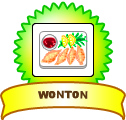
<style>
.page{position:relative;width:126px;height:120px;background:#ffffff}
.page>*{position:absolute;margin:0}
.t1{font:9.4px "Arial-Black";letter-spacing:0.045em;color:#5b3714;text-transform:uppercase}
</style>
<div class="page">
<p class="t1" style="left:38px;top:90px;width:50px;height:9px">wonton</p>
</div>
